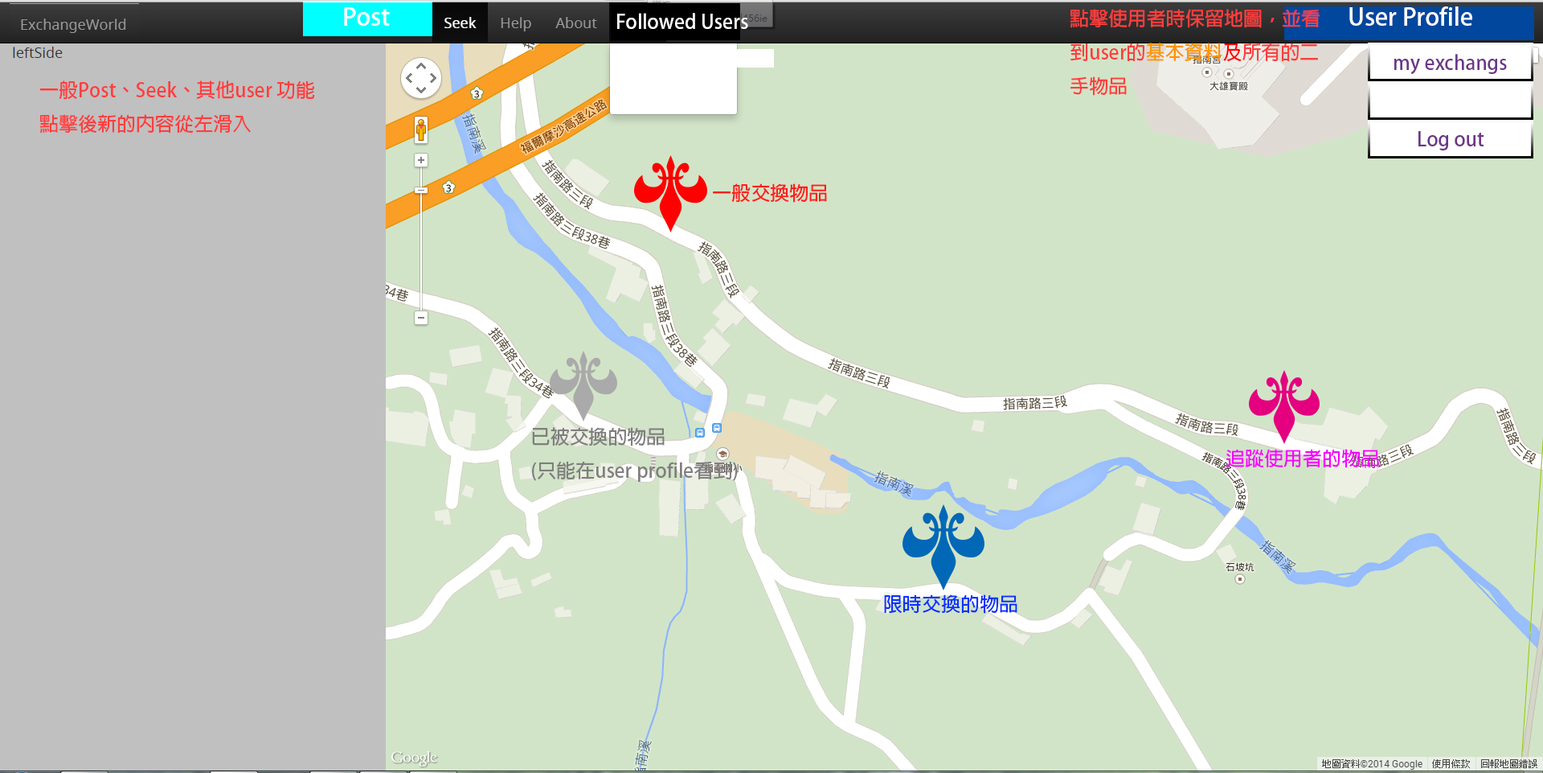
<style>
.page{position:relative;width:1543px;height:773px;background:#d2e4c8}
.page>*{position:absolute;margin:0}
.t1{font:19.3px "AdobeFanHeitiStd-Bold";color:#ffffff}
.t2{font:19.3px "AdobeFanHeitiStd-Bold";color:#ff3e3e}
.t3{font:19.3px "AdobeFanHeitiStd-Bold";color:#fd9500}
.t4{font:19.3px "AdobeFanHeitiStd-Bold";color:#fd0000}
.t5{font:19.3px "AdobeFanHeitiStd-Bold";color:#6c3787}
.t6{font:19.3px "AdobeFanHeitiStd-Bold";color:#ff1d1d}
.t7{font:19.3px "AdobeFanHeitiStd-Bold";color:#807e7e}
.t8{font:19.3px "AdobeFanHeitiStd-Bold";color:#f600ff}
.t9{font:19.3px "AdobeFanHeitiStd-Bold";color:#0932ff}
</style>
<div class="page">
<p class="t1" style="left:617px;top:13px;width:131px;height:16px">Followed Users</p>
<p class="t2" style="left:1070px;top:9px;width:250px;height:87px">點擊使用者時保留地圖，並看到user的<span class="t3">基本資料</span><span class="t4">及</span>所有的二手物品</p>
<p class="t5" style="left:1395px;top:54px;width:112px;height:21px">my exchangs</p>
<p class="t2" style="left:39px;top:80px;width:276px;height:53px">一般Post、Seek、其他user 功能<br>點擊後新的內容從左滑入</p>
<p class="t5" style="left:1419px;top:131px;width:66px;height:19px">Log out</p>
<p class="t6" style="left:713px;top:183px;width:114px;height:20px">一般交換物品</p>
<p class="t7" style="left:532px;top:427px;width:206px;height:55px">已被交換的物品<br>(只能在user profile看到)</p>
<p class="t8" style="left:1226px;top:449px;width:154px;height:19px">追蹤使用者的物品</p>
<p class="t9" style="left:884px;top:594px;width:134px;height:19px">限時交換的物品</p>
</div>
